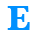
<style>
.page{position:relative;width:37px;height:37px;background:#ffffff}
.page>*{position:absolute;margin:0}
.t1{font:36px "Baskerville-Bold";color:#0090ff}
</style>
<div class="page">
<p class="t1" style="left:7px;top:6px;width:23px;height:24px">E</p>
</div>
